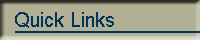
<style>
.page{position:relative;width:200px;height:40px;background:#b1b095}
.page>*{position:absolute;margin:0}
.t1{font:20px "ArialMT";color:#00355a}
</style>
<div class="page">
<p class="t1" style="left:15px;top:12px;width:99px;height:16px">Quick Links</p>
</div>
